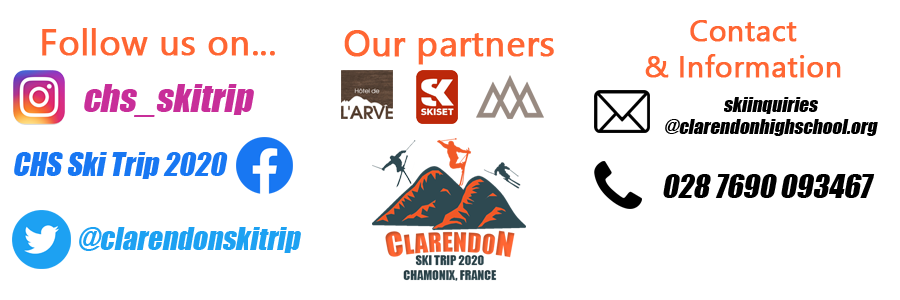
<style>
.page{position:relative;width:900px;height:300px;background:#ffffff}
.page>*{position:absolute;margin:0}
.t1{font:36px "SegoeUI";color:#ff6633;font-weight:bold}
.t2{font:30px "SegoeUI";color:#ff6633;font-weight:bold}
.t3{font:36px "Impact";color:#c82e99;font-style:italic}
.t4{font:19px "Impact";color:#000000;font-style:italic}
.t5{font:30px "Impact";color:#1877f2;font-style:italic}
.t6{font:30px "Impact";color:#000000;font-style:italic}
.t7{font:29px "Impact";color:#1da1f2;font-style:italic}
</style>
<div class="page">
<p class="t1" style="left:42px;top:28px;width:233px;height:28px">Follow us on...</p>
<p class="t1" style="left:344px;top:30px;width:210px;height:35px">Our partners</p>
<p class="t2" style="left:645px;top:20px;width:196px;height:58px;text-align:center">Contact<br>&amp; Information</p>
<p class="t3" style="left:84px;top:84px;width:170px;height:33px">chs_skitrip</p>
<p class="t4" style="left:665px;top:97px;width:213px;height:39px;text-align:center">skiinquiries<br>@clarendonhighschool.org</p>
<p class="t5" style="left:14px;top:152px;width:214px;height:27px">CHS Ski Trip 2020</p>
<p class="t6" style="left:663px;top:174px;width:212px;height:24px">028 7690 093467</p>
<p class="t7" style="left:79px;top:227px;width:222px;height:26px">@clarendonskitrip</p>
</div>
